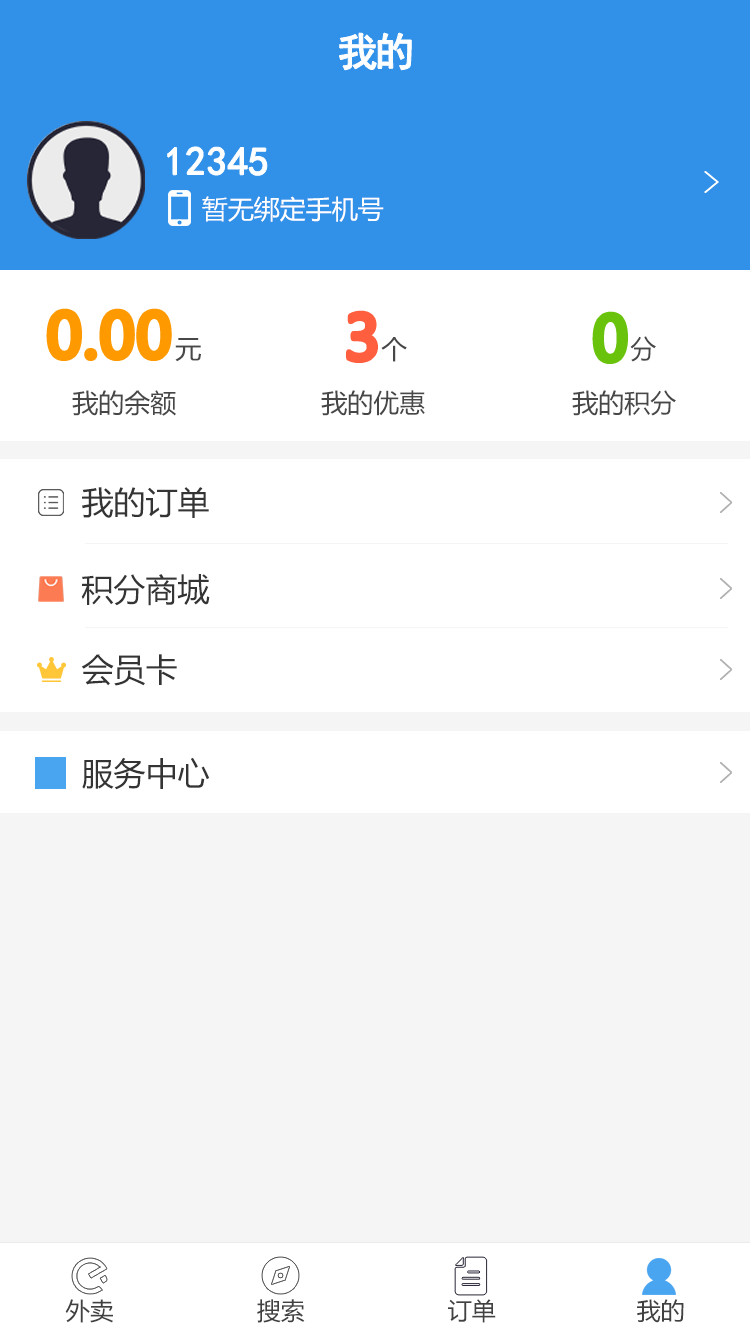
<style>
.page{position:relative;width:750px;height:1334px;background:#ffffff}
.page>*{position:absolute;margin:0}
.t1{font:40px "SimHei";letter-spacing:-0.1em;color:#ffffff;font-weight:bold}
.t2{font:40px "SimHei";color:#ffffff;font-weight:bold}
.t3{font:26px "MicrosoftYaHei";color:#ffffff}
.t4{font:60px "MicrosoftYaHei";color:#ff9900;font-weight:bold}
.t5{font:60px "MicrosoftYaHei";color:#ff5f3f;font-weight:bold}
.t6{font:60px "MicrosoftYaHei";color:#6ac20b;font-weight:bold}
.t7{font:26px "MicrosoftYaHei";color:#474747}
.t8{font:32px "MicrosoftYaHei";color:#343434}
.t9{font:24px "MicrosoftYaHei";color:#414141}
</style>
<div class="page">
<p class="t1" style="left:339px;top:33px;width:73px;height:37px">我的</p>
<p class="t2" style="left:167px;top:147px;width:100px;height:29px">12345</p>
<p class="t3" style="left:202px;top:196px;width:182px;height:26px">暂无绑定手机号</p>
<p class="t4" style="left:49px;top:311px;width:121px;height:48px">0.00</p>
<p class="t5" style="left:348px;top:313px;width:28px;height:48px">3</p>
<p class="t6" style="left:595px;top:314px;width:31px;height:48px">0</p>
<p class="t7" style="left:175px;top:338px;width:26px;height:24px">元</p>
<p class="t7" style="left:381px;top:337px;width:26px;height:25px">个</p>
<p class="t7" style="left:630px;top:336px;width:26px;height:26px">分</p>
<p class="t7" style="left:72px;top:390px;width:104px;height:26px">我的余额</p>
<p class="t7" style="left:321px;top:390px;width:104px;height:26px">我的优惠</p>
<p class="t7" style="left:572px;top:390px;width:104px;height:26px">我的积分</p>
<p class="t8" style="left:82px;top:487px;width:127px;height:31px">我的订单</p>
<p class="t8" style="left:81px;top:574px;width:129px;height:32px">积分商城</p>
<p class="t8" style="left:81px;top:654px;width:96px;height:32px">会员卡</p>
<p class="t8" style="left:82px;top:757px;width:128px;height:33px">服务中心</p>
<p class="t9" style="left:65px;top:1299px;width:48px;height:24px">外卖</p>
<p class="t9" style="left:257px;top:1299px;width:48px;height:24px">搜索</p>
<p class="t9" style="left:448px;top:1299px;width:48px;height:24px">订单</p>
<p class="t9" style="left:637px;top:1299px;width:47px;height:24px">我的</p>
</div>
